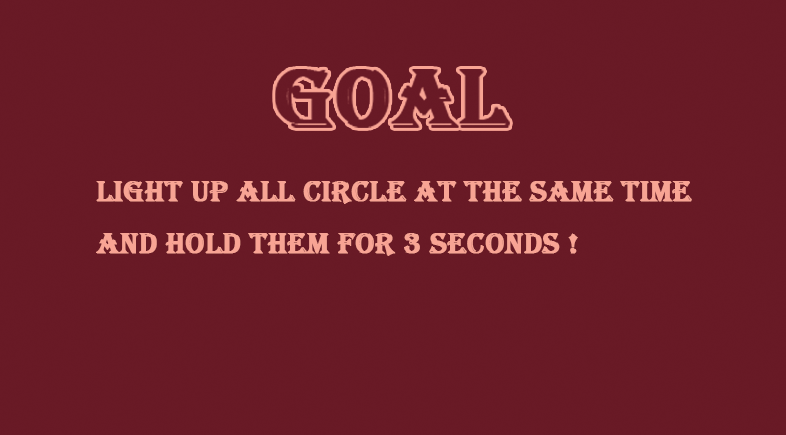
<style>
.page{position:relative;width:786px;height:435px;background:#691a26}
.page>*{position:absolute;margin:0}
.t1{font:30px "Algerian";color:#f8a494;font-weight:bold}
</style>
<div class="page">
<p class="t1" style="left:96px;top:181px;width:596px;height:75px">Light up all circle AT THE SAME TIME<br>AND HOLD THEM for 3 SECONDS !</p>
</div>
